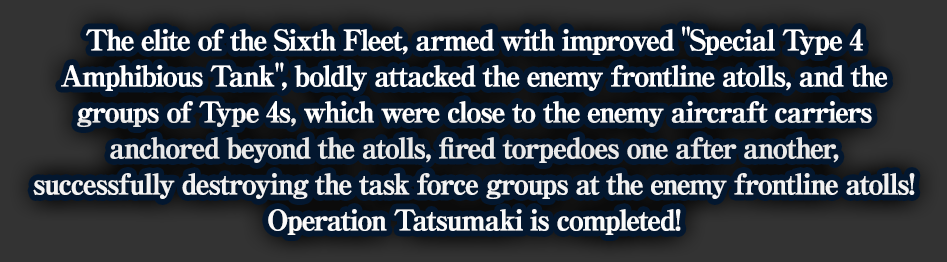
<style>
.page{position:relative;width:947px;height:262px;background:#03172f}
.page>*{position:absolute;margin:0}
.t1{font:28px/36px "RyuminPro-ExBold";letter-spacing:-0.08em;color:#ffffff;font-weight:bold}
</style>
<div class="page">
<p class="t1" style="left:33px;top:26px;width:882px;height:209px;text-align:center">The elite of the Sixth Fleet, armed with improved "Special Type 4<br>Amphibious Tank", boldly attacked the enemy frontline atolls, and the<br>groups of Type 4s, which were close to the enemy aircraft carriers<br>anchored beyond the atolls, fired torpedoes one after another,<br>successfully destroying the task force groups at the enemy frontline atolls!<br>Operation Tatsumaki is completed!</p>
</div>
